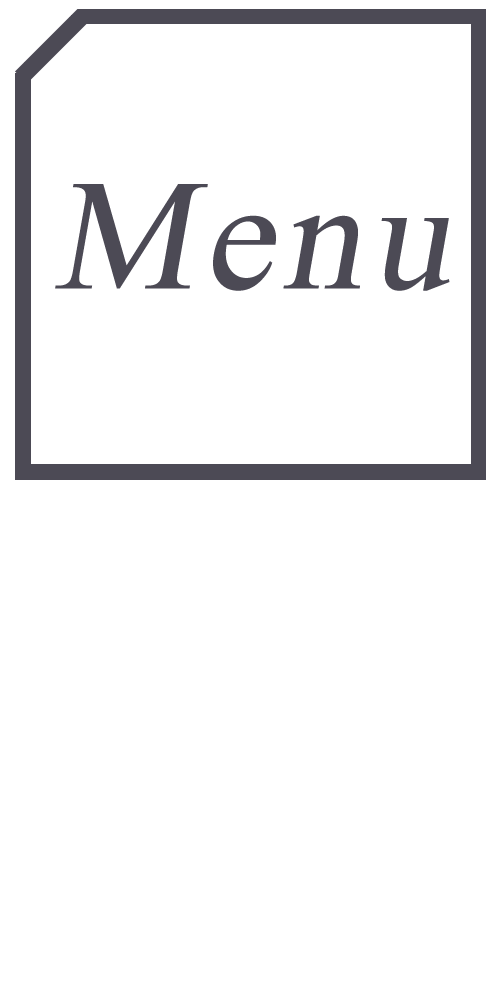
<style>
.page{position:relative;width:500px;height:1000px;background:#ffffff}
.page>*{position:absolute;margin:0}
.t1{font:157.5px "TimesNewRomanPSMT";letter-spacing:0.06em;color:#4c4a55;font-style:italic}
</style>
<div class="page">
<p class="t1" style="left:55px;top:184px;width:395px;height:107px">Menu</p>
</div>
